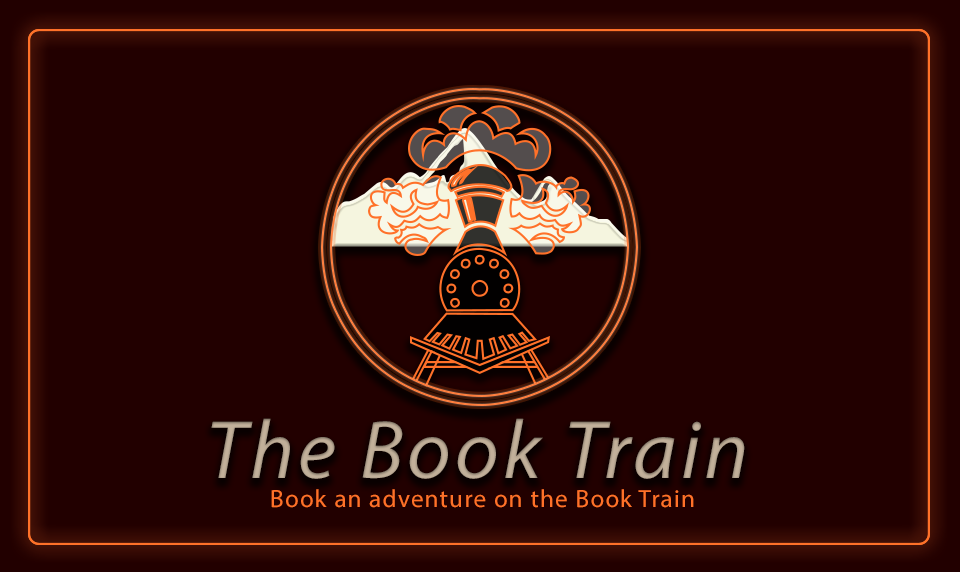
<style>
.page{position:relative;width:960px;height:572px;background:#220000}
.page>*{position:absolute;margin:0}
.t1{font:83.3px "MyriadPro-It";letter-spacing:0.05em;color:#c2b09a}
.t2{font:25px "MyriadPro-Regular";letter-spacing:0.05em;color:#ff7129}
</style>
<div class="page">
<p class="t1" style="left:211px;top:418px;width:534px;height:61px">The Book Train</p>
<p class="t2" style="left:271px;top:489px;width:423px;height:19px">Book an adventure on the Book Train</p>
</div>
